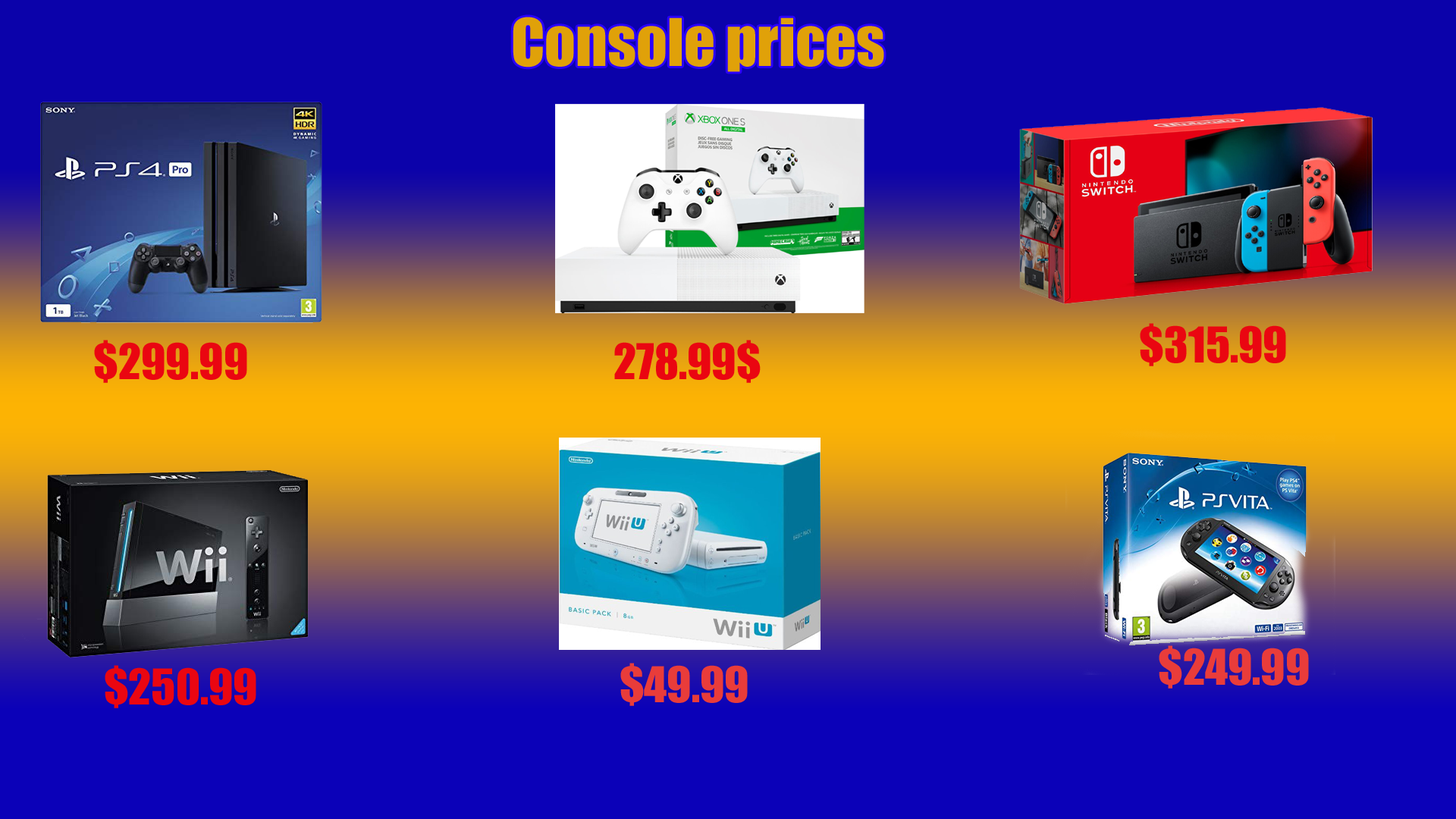
<style>
.page{position:relative;width:1456px;height:819px}
.page>*{position:absolute;margin:0}
.t1{font:60.7px "Impact";color:#e0a109}
.t2{font:45.5px "Impact";color:#ea0611}
.t3{font:45.5px "Impact";color:#e93c3a}
</style>
<div class="page">
<p class="t1" style="left:513px;top:17px;width:371px;height:55px">Console prices</p>
<p class="t2" style="left:1140px;top:323px;width:146px;height:43px">$315.99</p>
<p class="t2" style="left:94px;top:340px;width:153px;height:43px">$299.99</p>
<p class="t2" style="left:614px;top:340px;width:147px;height:43px">278.99$</p>
<p class="t3" style="left:1159px;top:645px;width:150px;height:44px">$249.99</p>
<p class="t2" style="left:105px;top:665px;width:151px;height:43px">$250.99</p>
<p class="t3" style="left:620px;top:663px;width:128px;height:43px">$49.99</p>
</div>
